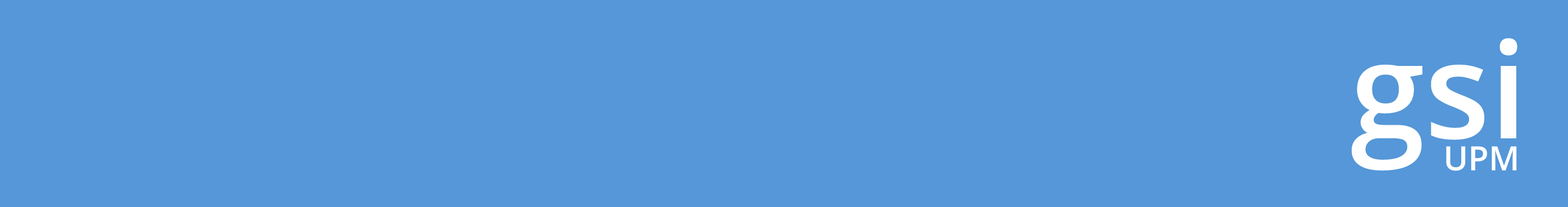
<style>
.page{position:relative;width:1568px;height:207px;background:#5597d8}
.page>*{position:absolute;margin:0}
.t1{font:133.8px "OpenSans-Semibold";color:#ffffff}
.t2{font:33.5px "OpenSans-Semibold";color:#ffffff}
</style>
<div class="page">
<p class="t1" style="left:1351px;top:38px;width:166px;height:132px">gsi</p>
<p class="t2" style="left:1446px;top:146px;width:71px;height:25px">UPM</p>
</div>
